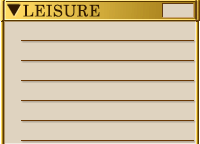
<style>
.page{position:relative;width:200px;height:144px;background:#dfd3c0}
.page>*{position:absolute;margin:0}
.t1{font:16px "CenturySchoolbook";letter-spacing:0.025em;color:#321a02}
</style>
<div class="page">
<p class="t1" style="left:23px;top:4px;width:77px;height:13px">LEISURE</p>
</div>
